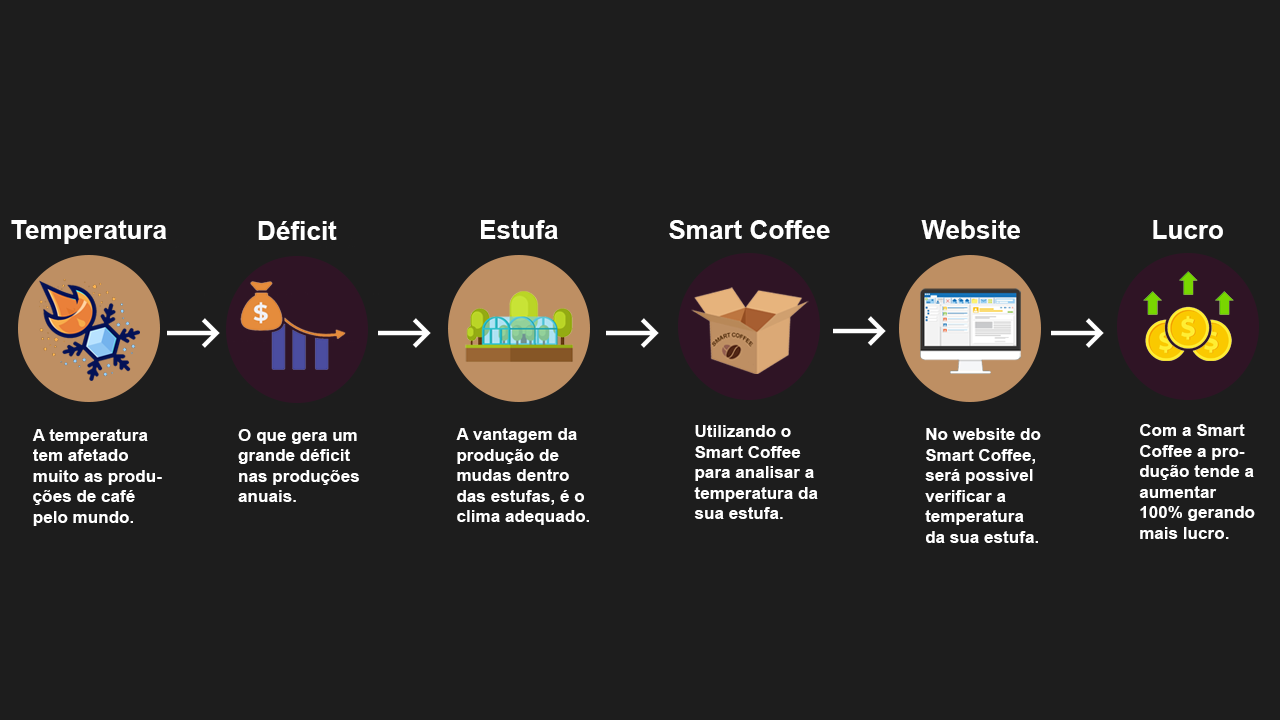
<style>
.page{position:relative;width:1280px;height:720px;background:#1d1d1d}
.page>*{position:absolute;margin:0}
.t1{font:26.1px "Arial-BoldMT";color:#ffffff}
.t2{font:17.1px "Arial-BoldMT";color:#ffffff}
</style>
<div class="page">
<p class="t1" style="left:11px;top:220px;width:156px;height:24px">Temperatura</p>
<p class="t1" style="left:258px;top:221px;width:79px;height:19px">Déficit</p>
<p class="t1" style="left:481px;top:220px;width:77px;height:19px">Estufa</p>
<p class="t1" style="left:669px;top:220px;width:161px;height:19px">Smart Coffee</p>
<p class="t1" style="left:921px;top:220px;width:99px;height:19px">Website</p>
<p class="t1" style="left:1153px;top:220px;width:70px;height:19px">Lucro</p>
<p class="t2" style="left:694px;top:425px;width:124px;height:94px">Utilizando o Smart Coffee para analisar a temperatura da sua estufa.</p>
<p class="t2" style="left:1139px;top:424px;width:116px;height:115px">Com a Smart Coffee a produção tende a aumentar 100% gerando mais lucro.</p>
<p class="t2" style="left:32px;top:429px;width:130px;height:97px">A temperatura tem afetado muito as produções de café pelo mundo.</p>
<p class="t2" style="left:238px;top:429px;width:121px;height:73px">O que gera um grande déficit nas produções anuais.</p>
<p class="t2" style="left:456px;top:428px;width:133px;height:97px">A vantagem da produção de mudas dentro das estufas, é o clima adequado.</p>
<p class="t2" style="left:925px;top:428px;width:116px;height:115px">No website do Smart Coffee, será possivel verificar a temperatura da sua estufa.</p>
</div>
